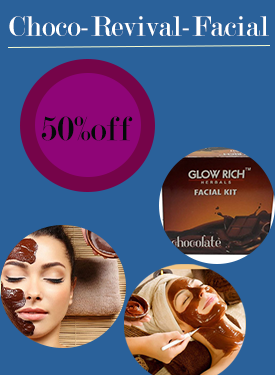
<style>
.page{position:relative;width:275px;height:375px;background:#2a619a}
.page>*{position:absolute;margin:0}
.t1{font:30px "Modern-Regular";color:#ffffff}
.t2{font:36.2px "Modern-Regular";color:#020a08}
</style>
<div class="page">
<p class="t1" style="left:9px;top:16px;width:260px;height:20px">Choco-Revival-Facial</p>
<p class="t2" style="left:41px;top:116px;width:92px;height:25px">50%off</p>
</div>
